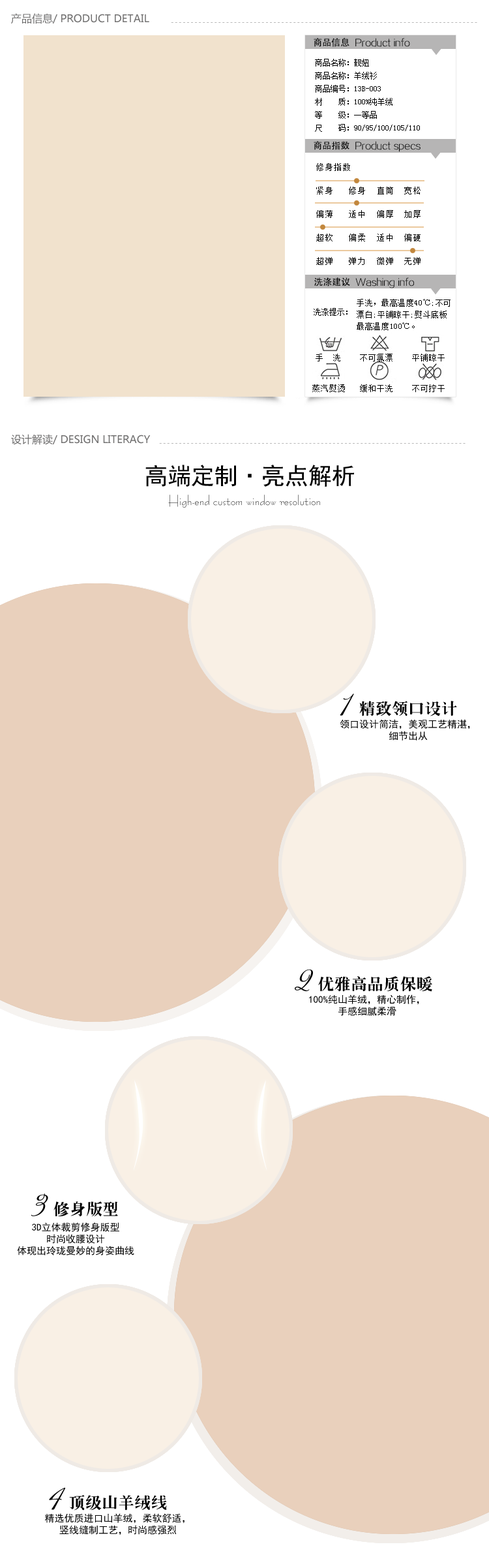
<style>
.page{position:relative;width:489px;height:1568px;background:#ffffff}
.page>*{position:absolute;margin:0}
.t1{font:10.4px "MicrosoftYaHei";color:#717070;text-transform:uppercase}
.t2{font:10.4px "Acid";letter-spacing:0.1em;text-transform:uppercase}
.t3{font:9.1px "FZZXHJW--GB1-0";color:#000000}
.t4{font:9.1px "AdobeHeitiStd-Regular";color:#000000}
.t5{font:7.8px/13.1px "SimSun";color:#000000}
.t6{font:8.5px/11.7px "SimSun";letter-spacing:0.05em;color:#000000}
.t7{font:9.1px "FZZXHJW--GB1-0";color:#010101}
.t8{font:9.1px "AdobeHeitiStd-Regular";color:#010101}
.t9{font:7.8px/11.7px "SimSun";letter-spacing:0.05em;color:#000000}
.t10{font:7.8px "SimSun";color:#000000}
.t11{font:8.5px "SimSun";color:#000000;text-transform:uppercase}
.t12{font:23.4px "SimHei";color:#000000}
.t13{font:13.1px "BernhardFashionBT-Regular"}
.t14{font:23.5px "BuffetScript";color:#000000}
.t15{font:15.7px "CTLaoSongSJ";letter-spacing:0.05em;color:#000000}
.t16{font:9.8px/11.7px "SimHei";color:#000000}
</style>
<div class="page">
<p class="t1" style="left:11px;top:13px;width:138px;height:11px">产品信息/ PRODUCT DETAIL</p>
<p class="t2" style="left:171px;top:22px;width:307px;height:1px">------------------------------------------------------------------------------</p>
<p class="t3" style="left:314px;top:38px;width:96px;height:9px"><span class="t4">商品信息  </span>Product info</p>
<p class="t5" style="left:315px;top:59px;width:105px;height:73px">商品名称：靓妞<br>商品名称：羊绒衫<br>商品编号：13B-003 <br>材    质：100%纯羊绒<br>等    级：一等品<br>尺    码：90/95/100/105/110</p>
<p class="t3" style="left:314px;top:141px;width:107px;height:11px"><span class="t4">商品指数  </span>Product specs</p>
<p class="t6" style="left:316px;top:163px;width:105px;height:102px">修身指数<br><br>紧身   修身  直筒  宽松<br><br>偏薄   适中  偏厚  加厚<br><br>超软   偏柔  适中  偏硬<br><br>超弹   弹力  微弹  无弹</p>
<p class="t7" style="left:315px;top:277px;width:99px;height:11px"><span class="t8">洗涤建议  </span>Washing info</p>
<p class="t9" style="left:357px;top:299px;width:94px;height:31px">手洗，最高温度40℃;不可漂白;平铺晾干;熨斗底板最高温度100℃。</p>
<p class="t10" style="left:314px;top:308px;width:34px;height:8px">洗涤提示：</p>
<p class="t11" style="left:316px;top:354px;width:129px;height:7px">手  洗    不可氯漂    平铺晾干</p>
<p class="t11" style="left:313px;top:384px;width:132px;height:8px">蒸汽熨烫   缓和干洗    不可拧干</p>
<p class="t1" style="left:11px;top:434px;width:140px;height:11px">设计解读/ Design Literacy</p>
<p class="t2" style="left:159px;top:443px;width:307px;height:1px">------------------------------------------------------------------------------</p>
<p class="t12" style="left:146px;top:465px;width:208px;height:22px">高端定制·亮点解析</p>
<p class="t13" style="left:168px;top:495px;width:152px;height:13px">High-end custom window resolution</p>
<p class="t14" style="left:340px;top:694px;width:14px;height:22px">1</p>
<p class="t15" style="left:360px;top:701px;width:97px;height:15px">精致领口设计</p>
<p class="t16" style="left:340px;top:719px;width:130px;height:22px;text-align:center">领口设计简洁，美观工艺精湛，<br>细节出从</p>
<p class="t14" style="left:295px;top:969px;width:18px;height:22px">2</p>
<p class="t15" style="left:318px;top:976px;width:115px;height:16px">优雅高品质保暖</p>
<p class="t16" style="left:309px;top:994px;width:111px;height:22px;text-align:center">100%纯山羊绒，精心制作，<br>手感细腻柔滑</p>
<p class="t14" style="left:31px;top:1193px;width:17px;height:23px">3</p>
<p class="t15" style="left:54px;top:1201px;width:64px;height:15px">修身版型</p>
<p class="t16" style="left:17px;top:1222px;width:117px;height:33px;text-align:center">3D立体裁剪修身版型<br>时尚收腰设计<br>体现出玲珑曼妙的身姿曲线</p>
<p class="t14" style="left:49px;top:1488px;width:17px;height:22px">4</p>
<p class="t15" style="left:69px;top:1495px;width:98px;height:16px">顶级山羊绒线</p>
<p class="t16" style="left:45px;top:1513px;width:140px;height:22px;text-align:center">精选优质进口山羊绒，柔软舒适，<br>竖线缝制工艺，时尚感强烈</p>
</div>
